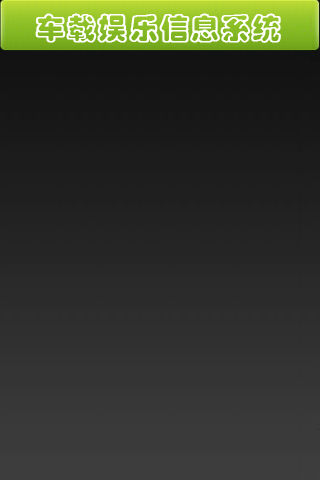
<style>
.page{position:relative;width:320px;height:480px}
.page>*{position:absolute;margin:0}
.t1{font:30px "STCaiyun";color:#ffffff;font-weight:bold}
</style>
<div class="page">
<p class="t1" style="left:35px;top:13px;width:246px;height:30px">车载娱乐信息系统</p>
</div>
